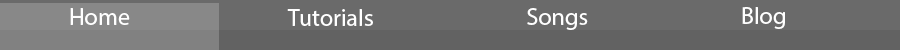
<style>
.page{position:relative;width:900px;height:50px;background:#6a6a6a}
.page>*{position:absolute;margin:0}
.t1{font:24px "MyriadPro-Regular";color:#ffffff}
</style>
<div class="page">
<p class="t1" style="left:70px;top:8px;width:60px;height:17px">Home</p>
<p class="t1" style="left:287px;top:9px;width:86px;height:17px">Tutorials</p>
<p class="t1" style="left:527px;top:8px;width:61px;height:22px">Songs</p>
<p class="t1" style="left:742px;top:7px;width:43px;height:22px">Blog</p>
</div>
